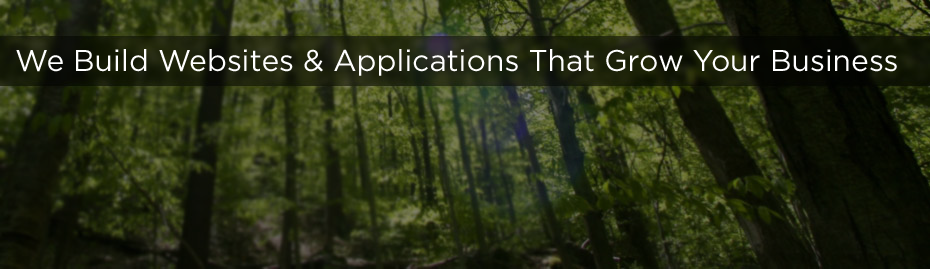
<style>
.page{position:relative;width:930px;height:269px}
.page>*{position:absolute;margin:0}
.t1{font:30px "GothamHTF-Book";color:#ffffff}
</style>
<div class="page">
<p class="t1" style="left:16px;top:49px;width:881px;height:27px">We Build Websites &amp; Applications That Grow Your Business</p>
</div>
